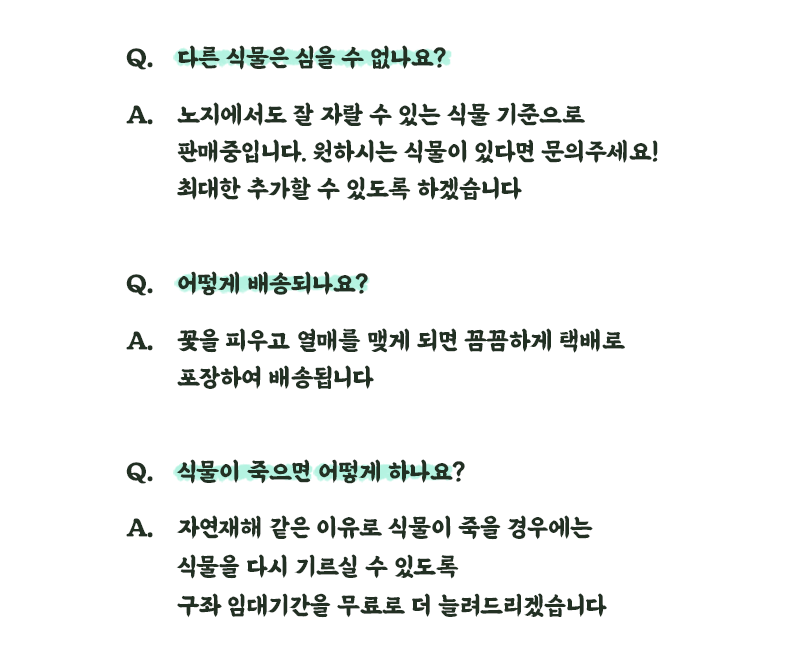
<style>
.page{position:relative;width:800px;height:662px;background:#ffffff}
.page>*{position:absolute;margin:0}
.t1{font:25.8px "SDKukdetopokki-bBd";letter-spacing:-0.02em;color:#223023}
.t2{font:25.8px "BMEULJIRO";letter-spacing:-0.02em;color:#223023}
.t3{font:25.8px/37.3px "BMEULJIRO";letter-spacing:-0.02em;color:#223023}
.t4{font:25.8px/34.6px "BMEULJIRO";letter-spacing:-0.02em;color:#223023}
.t5{font:25.8px/32px "BMEULJIRO";letter-spacing:-0.02em;color:#223023}
.t6{font:25.8px/38.6px "BMEULJIRO";letter-spacing:-0.02em;color:#223023}
</style>
<div class="page">
<p class="t1" style="left:126px;top:48px;width:27px;height:22px">Q.</p>
<p class="t2" style="left:178px;top:45px;width:268px;height:25px">다른 식물은 심을 수 없나요?</p>
<p class="t3" style="left:177px;top:102px;width:481px;height:99px">노지에서도 잘 자랄 수 있는 식물 기준으로<br>판매중입니다. 원하시는 식물이 있다면 문의주세요! <br>최대한 추가할 수 있도록 하겠습니다</p>
<p class="t1" style="left:126px;top:105px;width:27px;height:20px">A.</p>
<p class="t1" style="left:126px;top:274px;width:27px;height:22px">Q.</p>
<p class="t2" style="left:178px;top:271px;width:190px;height:25px">어떻게 배송되나요?</p>
<p class="t3" style="left:177px;top:328px;width:448px;height:61px">꽃을 피우고 열매를 맺게 되면 꼼꼼하게 택배로 <br>포장하여 배송됩니다</p>
<p class="t1" style="left:126px;top:331px;width:27px;height:20px">A.</p>
<p class="t1" style="left:126px;top:462px;width:27px;height:22px">Q.</p>
<p class="t2" style="left:176px;top:459px;width:289px;height:25px">식물이 죽으면 어떻게 하나요?</p>
<p class="t1" style="left:126px;top:518px;width:27px;height:20px">A.</p>
<p class="t4" style="left:176px;top:515px;width:431px;height:103px"><span class="t5">자연</span>재<span class="t6">해 </span>같은 이유로 식물이 죽을 경우에는<br>식물을 다<span class="t6">시 기르실 수 있도록 <br></span>구좌 임대기간을 무료로 더 늘려드리겠습니다</p>
</div>
